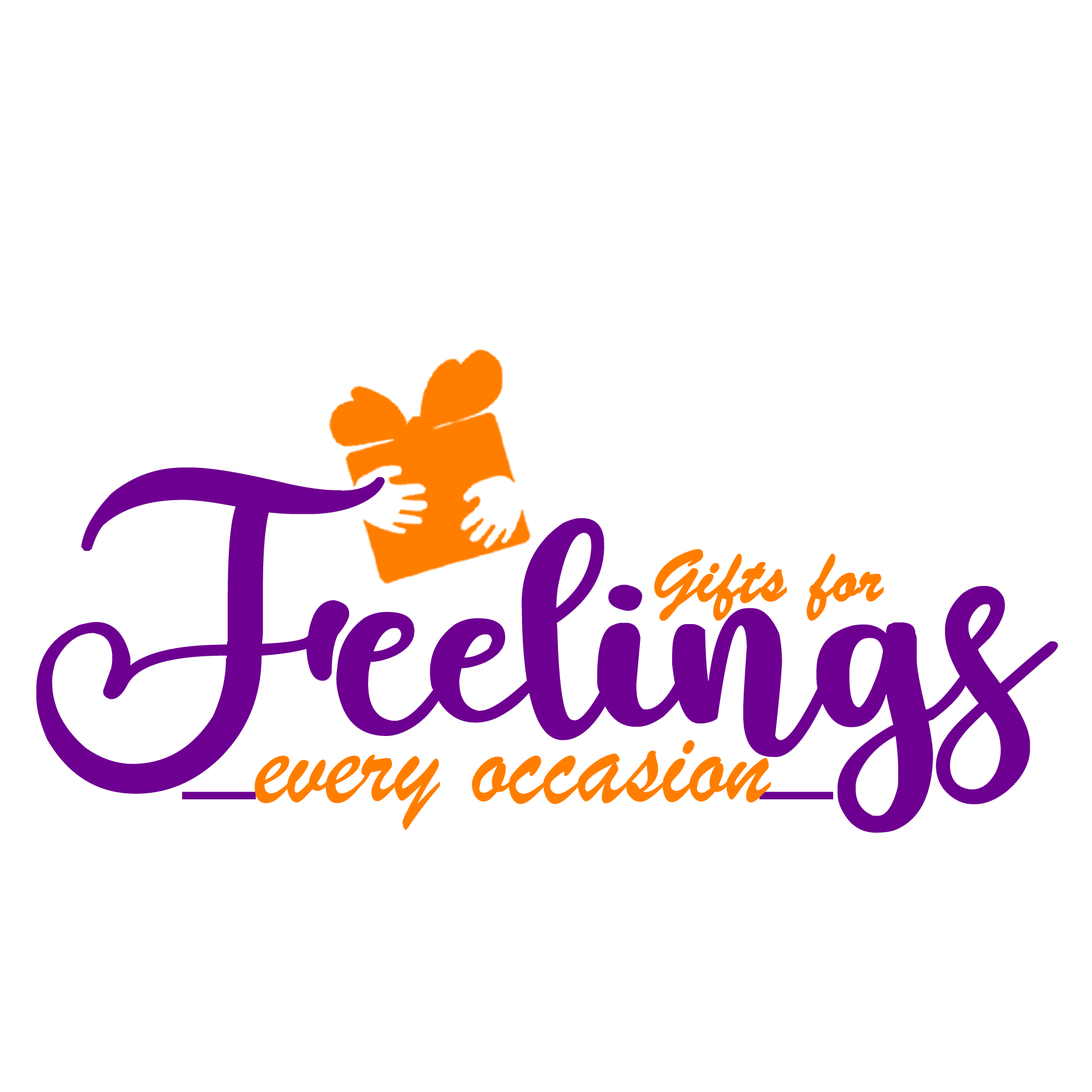
<style>
.page{position:relative;width:1092px;height:1092px;background:#ffffff}
.page>*{position:absolute;margin:0}
.t1{font:857.2px "shalma";color:#6d0091;scale:1.07 1}
.t2{font:76.5px "BrushScriptMT";color:#ff7e00;font-weight:bold}
.t3{font:127.7px "BrushScriptMT";color:#ff7e00;scale:0.92 1}
.t4{font:127.7px "BrushScriptMT";color:#ff8400;scale:0.92 1}
</style>
<div class="page">
<p class="t1" style="left:36px;top:467px;width:1022px;height:366px">Feelings</p>
<p class="t2" style="left:654px;top:549px;width:230px;height:72px">Gifts for</p>
<p class="t3" style="left:254px;top:740px;width:517px;height:90px"><span class="t4"> </span> every occasion</p>
</div>
